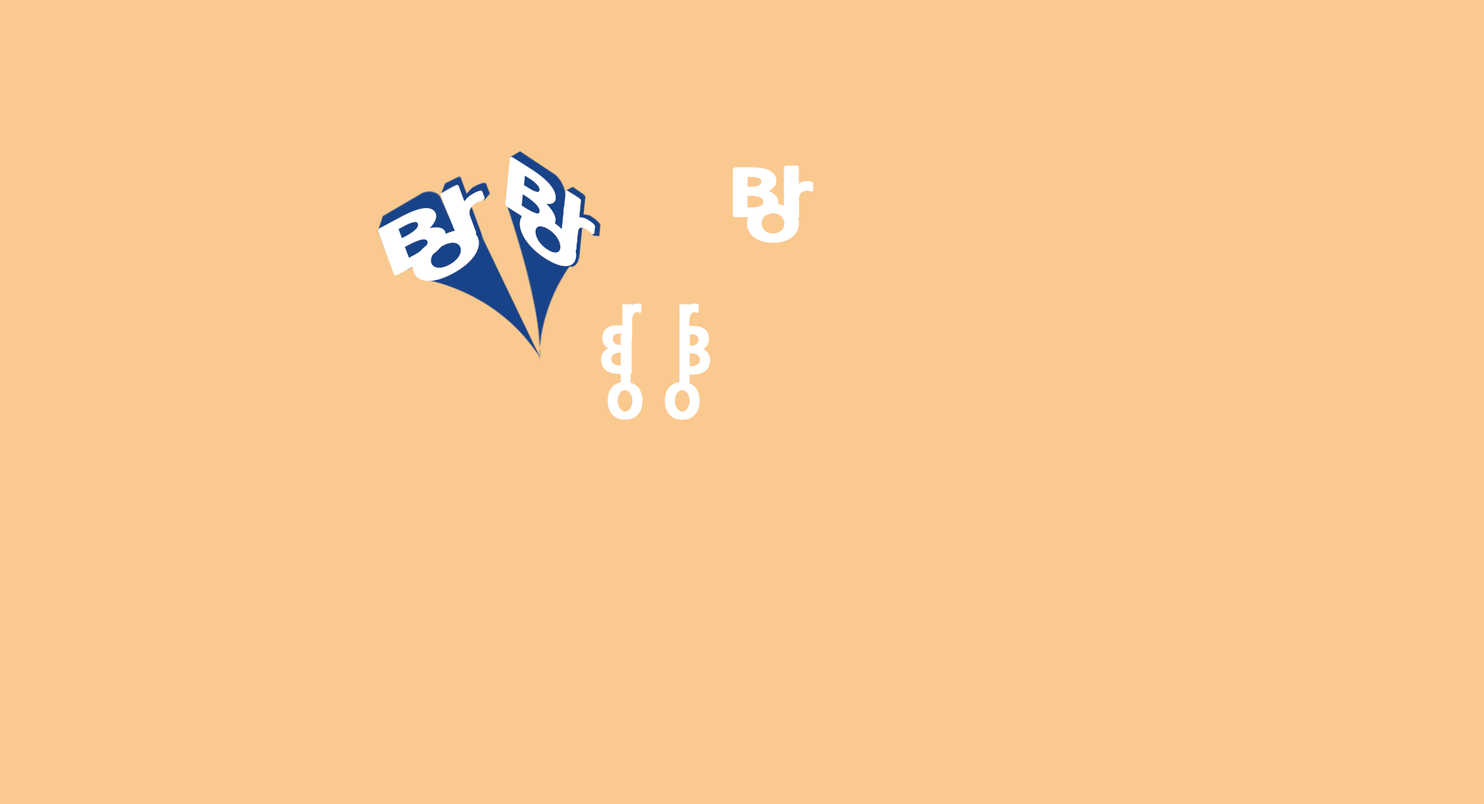
<style>
.page{position:relative;width:1484px;height:804px;background:#fac98f}
.page>*{position:absolute;margin:0}
.t1{font:61.8px "NanumGothicExtraBold";color:#ffffff;font-weight:bold;scale:1.94 1}
.t2{font:61.8px "NanumGothicExtraBold";color:#ffffff;font-weight:bold;scale:1.51 1}
.t3{font:62px "NanumGothicExtraBold";color:#ffffff;font-weight:bold;scale:1.55 1}
.t4{font:62.1px "NanumGothicExtraBold";color:#ffffff;font-weight:bold;scale:2.19 1}
.t5{font:62px "NanumGothicExtraBold";color:#ffffff;font-weight:bold;scale:1.51 1}
.t6{font:62.1px "NanumGothicExtraBold";color:#ffffff;font-weight:bold;scale:2.13 1}
.t7{font:62px "NanumGothicExtraBold";color:#ffffff;font-weight:bold;scale:1.99 1}
.t8{font:61.9px "NanumGothicExtraBold";color:#ffffff;font-weight:bold;scale:2.14 1}
.t9{font:62px "NanumGothicExtraBold";color:#ffffff;font-weight:bold;scale:1.93 1}
.t10{font:61.8px "NanumGothicExtraBold";color:#ffffff;font-weight:bold}
</style>
<div class="page">
<p class="t1" style="left:505px;top:157px;width:51px;height:71px;rotate:33deg">B</p>
<p class="t2" style="left:733px;top:167px;width:45px;height:50px">B</p>
<p class="t3" style="left:784px;top:165px;width:15px;height:54px">l</p>
<p class="t4" style="left:440px;top:185px;width:36px;height:58px;rotate:-28deg">l</p>
<p class="t5" style="left:784px;top:181px;width:30px;height:38px">r</p>
<p class="t6" style="left:447px;top:190px;width:38px;height:53px;rotate:-28deg">r</p>
<p class="t7" style="left:559px;top:190px;width:22px;height:61px;rotate:33deg">l</p>
<p class="t8" style="left:378px;top:208px;width:68px;height:68px;rotate:-28deg">B</p>
<p class="t9" style="left:560px;top:206px;width:35px;height:45px;rotate:33deg">r</p>
<p class="t2" style="left:746px;top:203px;width:53px;height:40px">o</p>
<p class="t1" style="left:519px;top:212px;width:57px;height:55px;rotate:33deg">o</p>
<p class="t8" style="left:413px;top:230px;width:66px;height:51px;rotate:-28deg">o</p>
<p class="t10" style="left:622px;top:303px;width:19px;height:37px">r</p>
<p class="t10" style="left:679px;top:303px;width:20px;height:37px">r</p>
<p class="t10" style="left:600px;top:325px;width:32px;height:49px;rotate:180deg">B</p>
<p class="t10" style="left:679px;top:325px;width:31px;height:50px">B</p>
<p class="t10" style="left:607px;top:382px;width:36px;height:38px">o</p>
<p class="t10" style="left:665px;top:382px;width:35px;height:38px">o</p>
</div>
